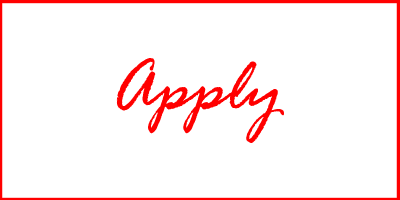
<style>
.page{position:relative;width:400px;height:200px;background:#ffffff}
.page>*{position:absolute;margin:0}
.t1{font:78px "RageItalic";color:#ff0000}
</style>
<div class="page">
<p class="t1" style="left:116px;top:58px;width:168px;height:85px">Apply</p>
</div>
